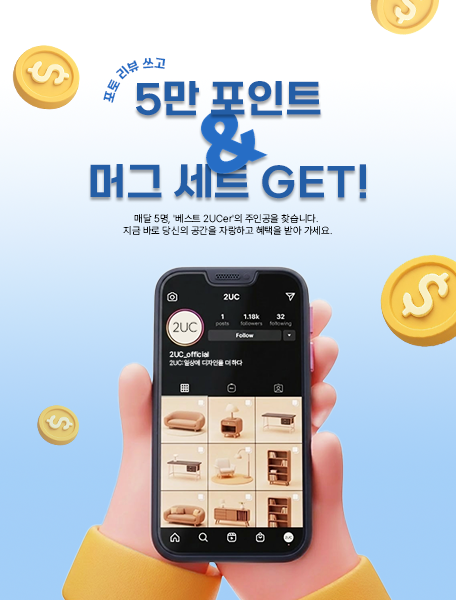
<style>
.page{position:relative;width:456px;height:600px}
.page>*{position:absolute;margin:0}
.t1{font:12px/42px "SBAggroM";color:#266dc5}
.t2{font:40px "SBAggroM";color:#245ea6}
.t3{font:75px "SBAggroB";color:#266dc5}
.t4{font:10px "Pretendard-ExtraLight";color:#000000}
</style>
<div class="page">
<p class="t1" style="left:103px;top:57px;width:63px;height:46px;text-align:center">포토 리뷰 쓰고</p>
<p class="t2" style="left:136px;top:81px;width:185px;height:35px">5만 포인트</p>
<p class="t3" style="left:201px;top:109px;width:67px;height:65px;rotate:-24deg">&amp;</p>
<p class="t2" style="left:90px;top:164px;width:276px;height:35px">머그 세트 GET!</p>
<p class="t4" style="left:123px;top:214px;width:209px;height:21px;text-align:center">매달 5명, '베스트 2UCer'의 주인공을 찾습니다. <br>지금 바로 당신의 공간을 자랑하고 혜택을 받아 가세요.</p>
</div>
